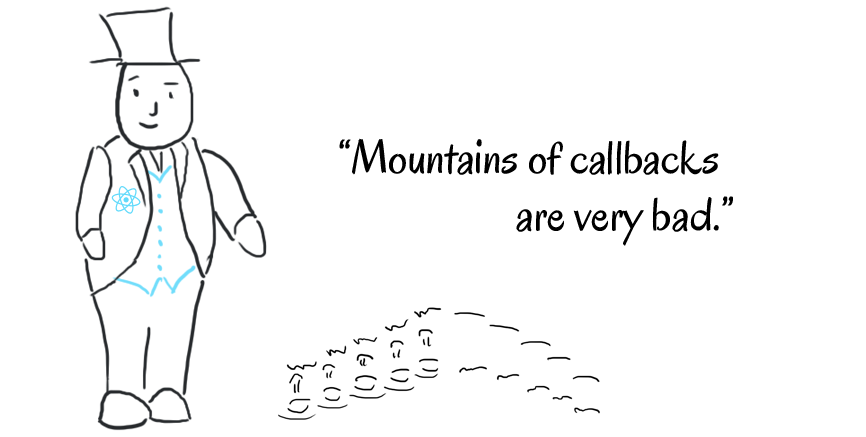
<style>
.page{position:relative;width:866px;height:437px;background:#ffffff}
.page>*{position:absolute;margin:0}
.t1{font:48px "Oregano-Regular";color:#000000}
</style>
<div class="page">
<p class="t1" style="left:339px;top:138px;width:394px;height:108px">“Mountains of callbacks<br>                    are very bad.”</p>
</div>
